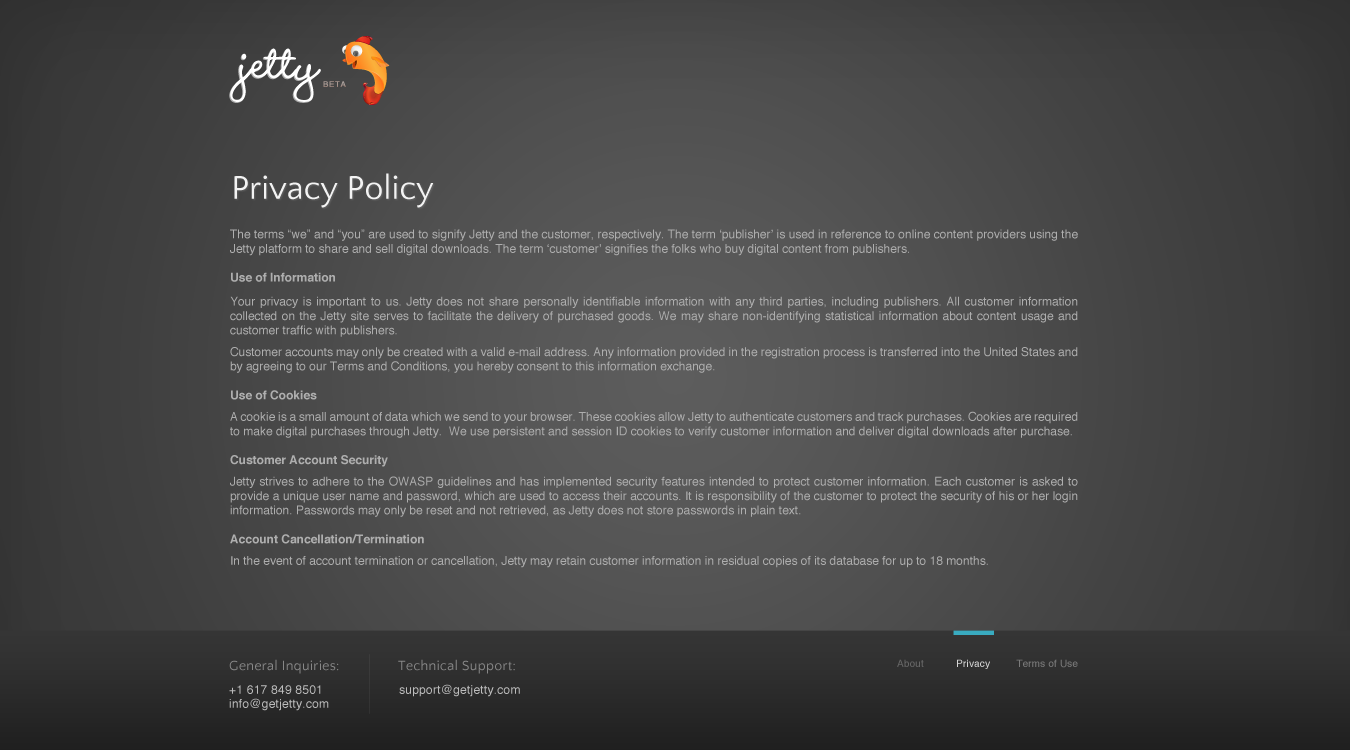
<style>
.page{position:relative;width:1350px;height:750px}
.page>*{position:absolute;margin:0}
.t1{font:66px "WendyLPStd-Bold";letter-spacing:0.015em;color:#ffffff}
.t2{font:8px "Helvetica";letter-spacing:0.08em;color:#a5948e}
.t3{font:34px "QuattrocentoSans";color:#f2f2f2}
.t4{font:12px "Helvetica";color:#aeaeae}
.t5{font:12px "Helvetica-Bold";color:#aeaeae}
.t6{font:14px "QuattrocentoSans";letter-spacing:0.02em;color:#888888}
.t7{font:10px "Helvetica";letter-spacing:0.015em;color:#7b7b7b}
.t8{font:10px "Helvetica";letter-spacing:0.015em;color:#676767}
.t9{font:10px "Helvetica";letter-spacing:0.015em;color:#d7d7d7}
.t10{font:12px/14px "Helvetica";letter-spacing:0.02em;color:#bcbcbc}
.t11{font:12px "Helvetica";letter-spacing:0.02em;color:#bcbcbc}
</style>
<div class="page">
<p class="t1" style="left:229px;top:48px;width:92px;height:55px">jetty</p>
<p class="t2" style="left:323px;top:81px;width:23px;height:6px">BETA</p>
<p class="t3" style="left:234px;top:173px;width:200px;height:35px">Privacy Policy</p>
<p class="t4" style="left:230px;top:229px;width:848px;height:339px;text-align:justify">The terms “we” and “you” are used to signify Jetty and the customer, respectively. The term ‘publisher’ is used in reference to online content providers using the Jetty platform to share and sell digital downloads. The term ‘customer’ signifies the folks who buy digital content from publishers.<br><br><span class="t5">Use of Information<br><br></span>Your privacy is important to us. Jetty does not share personally identifiable information with any third parties, including publishers. All customer information collected on the Jetty site serves to facilitate the delivery of purchased goods. We may share non-identifying statistical information about content usage and customer traffic with publishers.<br><br>Customer accounts may only be created with a valid e-mail address. Any information provided in the registration process is transferred into the United States and by agreeing to our Terms and Conditions, you hereby consent to this information exchange.<br><br><span class="t5">Use of Cookies<br><br></span>A cookie is a small amount of data which we send to your browser. These cookies allow Jetty to authenticate customers and track purchases. Cookies are required to make digital purchases through Jetty.  We use persistent and session ID cookies to verify customer information and deliver digital downloads after purchase.<br><br><span class="t5">Customer Account Security<br><br></span>Jetty strives to adhere to the OWASP guidelines and has implemented security features intended to protect customer information. Each customer is asked to provide a unique user name and password, which are used to access their accounts. It is responsibility of the customer to protect the security of his or her login information. Passwords may only be reset and not retrieved, as Jetty does not store passwords in plain text.<br><br><span class="t5">Account Cancellation/Termination<br><br></span>In the event of account termination or cancellation, Jetty may retain customer information in residual copies of its database for up to 18 months.</p>
<p class="t6" style="left:229px;top:659px;width:110px;height:15px">General Inquiries:</p>
<p class="t6" style="left:398px;top:659px;width:117px;height:15px">Technical Support:</p>
<p class="t7" style="left:897px;top:659px;width:181px;height:10px"><span class="t8">About           </span><span class="t9">Privacy         </span>Terms of Use</p>
<p class="t10" style="left:229px;top:685px;width:100px;height:26px">+1 617 849 8501            <br>info@getjetty.com</p>
<p class="t11" style="left:399px;top:684px;width:121px;height:13px">support@getjetty.com</p>
</div>
